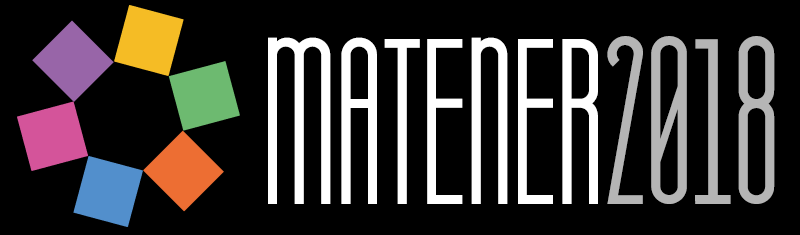
<style>
.page{position:relative;width:800px;height:235px;background:#000000}
.page>*{position:absolute;margin:0}
.t1{font:226.8px "Komoda-Regular";color:#ffffff}
.t2{font:226.8px "Komoda-Regular";color:#b5b5b5}
</style>
<div class="page">
<p class="t1" style="left:268px;top:36px;width:507px;height:168px">maTENER<span class="t2">2018</span></p>
</div>
